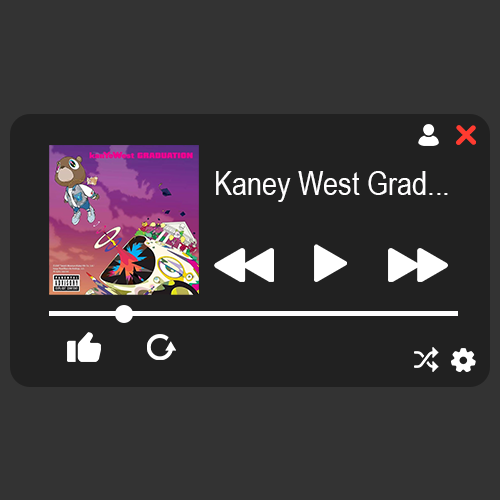
<style>
.page{position:relative;width:500px;height:500px;background:#333333}
.page>*{position:absolute;margin:0}
.t1{font:33px "ArialNarrow";color:#fffeff}
</style>
<div class="page">
<p class="t1" style="left:216px;top:171px;width:232px;height:31px">Kaney West Grad...</p>
</div>
